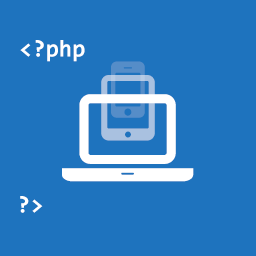
<style>
.page{position:relative;width:256px;height:256px;background:#1e73be}
.page>*{position:absolute;margin:0}
.t1{font:24px "Consolas-Bold";color:#ffffff}
.t2{font:24px "Consolas-Bold";color:#ffffff;text-transform:uppercase}
</style>
<div class="page">
<p class="t1" style="left:20px;top:40px;width:65px;height:22px"><span class="t2">&lt;?</span>php</p>
<p class="t2" style="left:20px;top:196px;width:23px;height:17px">?&gt;</p>
</div>
